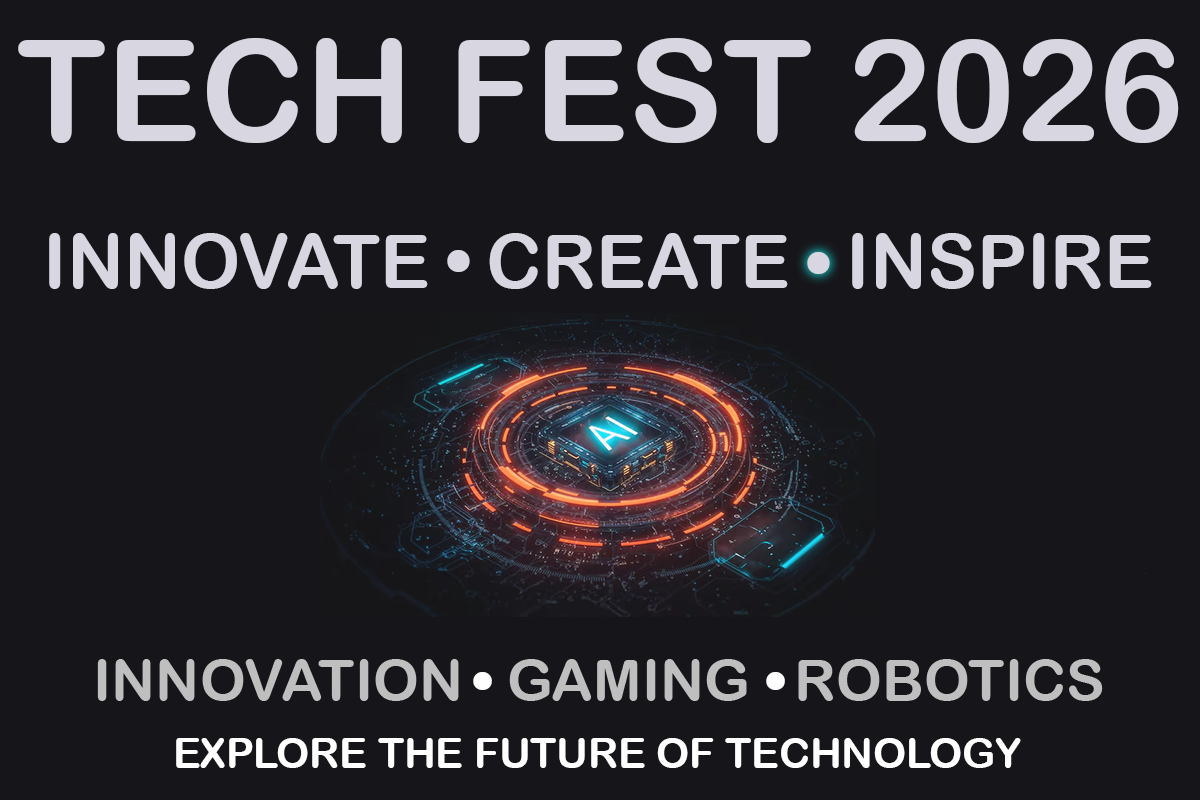
<style>
.page{position:relative;width:1200px;height:800px;background:#16161a}
.page>*{position:absolute;margin:0}
.t1{font:141.7px "ArialRoundedMTBold";color:#d8d7e1}
.t2{font:75px "ArialRoundedMTBold";color:#d8d7e1}
.t3{font:150px "ArialRoundedMTBold";color:#d8d7e1}
.t4{font:125px "ArialRoundedMTBold";color:#ffffff}
.t5{font:41.7px "ArialRoundedMTBold";color:#ffffff}
</style>
<div class="page">
<p class="t1" style="left:18px;top:38px;width:1161px;height:105px">TECH FEST 2026</p>
<p class="t2" style="left:49px;top:233px;width:1103px;height:56px">INNOVATE   CREATE   INSPIRE</p>
<p class="t3" style="left:447px;top:250px;width:23px;height:22px">.</p>
<p class="t3" style="left:807px;top:252px;width:23px;height:22px">.</p>
<p class="t4" style="left:473px;top:672px;width:19px;height:18px">.</p>
<p class="t4" style="left:766px;top:672px;width:19px;height:18px">.</p>
<p class="t5" style="left:176px;top:738px;width:845px;height:30px">EXPLORE THE FUTURE OF TECHNOLOGY</p>
</div>
